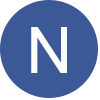
<style>
.page{position:relative;width:100px;height:100px;background:#3b5997}
.page>*{position:absolute;margin:0}
.t1{font:64px "ArialMT";color:#ffffff}
</style>
<div class="page">
<p class="t1" style="left:31px;top:27px;width:36px;height:46px">N</p>
</div>
